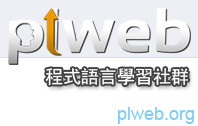
<style>
.page{position:relative;width:198px;height:126px;background:#ffffff}
.page>*{position:absolute;margin:0}
.t1{font:18px "SimHei";color:#ffffff}
.t2{font:18px "ArialMT";color:#7ecef4}
</style>
<div class="page">
<p class="t1" style="left:45px;top:68px;width:144px;height:18px">程式語言學習社群</p>
<p class="t2" style="left:117px;top:107px;width:77px;height:17px">plweb.org</p>
</div>
